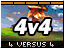
<style>
.page{position:relative;width:64px;height:48px}
.page>*{position:absolute;margin:0}
.t1{font:22px "FranklinGothic-Heavy";color:#ffffff;font-style:italic}
</style>
<div class="page">
<p class="t1" style="left:14px;top:19px;width:37px;height:15px">4v4</p>
</div>
